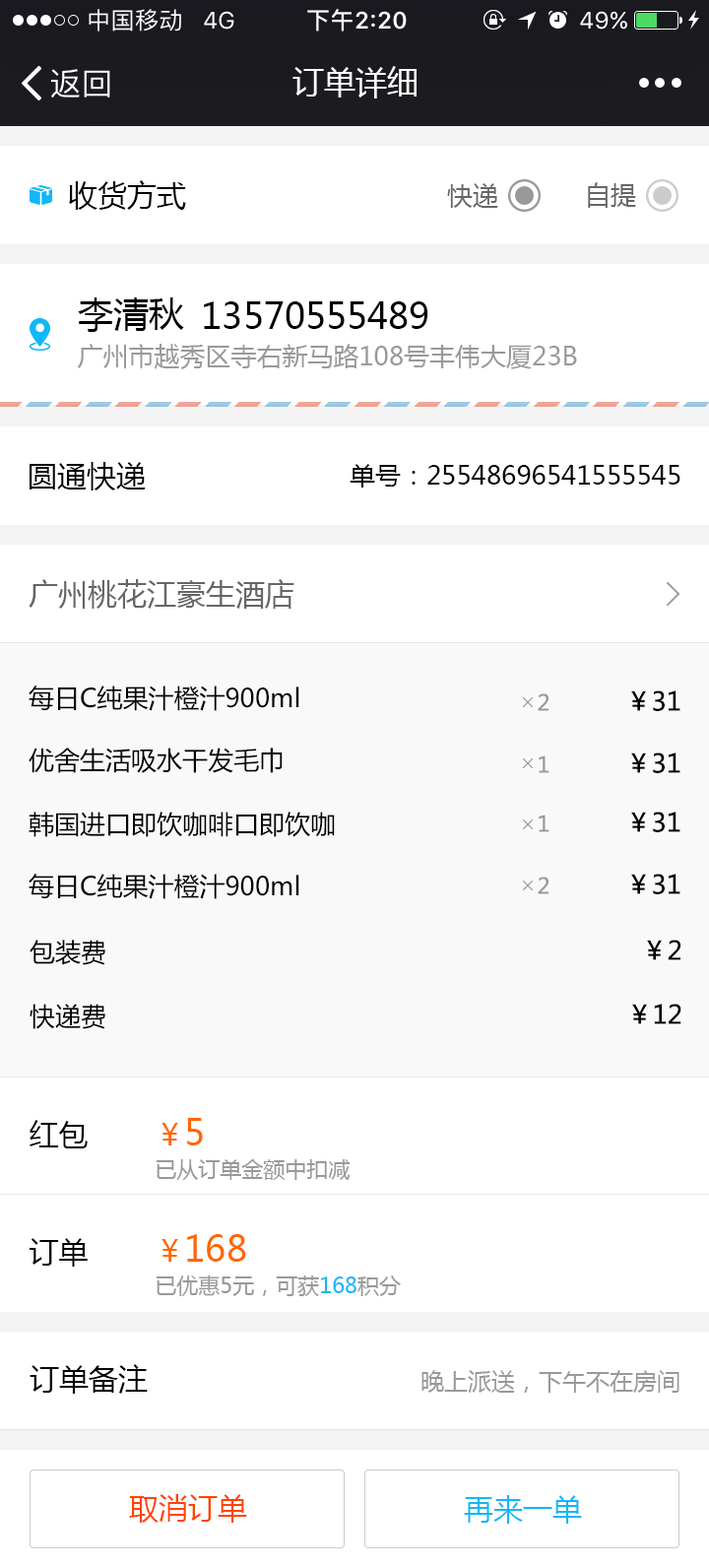
<style>
.page{position:relative;width:709px;height:1568px;background:#ffffff}
.page>*{position:absolute;margin:0}
.t1{font:31.5px "MicrosoftYaHei";color:#ffffff}
.t2{font:29.5px "MicrosoftYaHei";color:#000000}
.t3{font:25.6px "MicrosoftYaHei";color:#666666}
.t4{font:35.5px "MicrosoftYaHei";color:#000000}
.t5{font:25.6px "MicrosoftYaHei";color:#999999}
.t6{font:25.6px "MicrosoftYaHei";color:#000000}
.t7{font:29.5px "MicrosoftYaHei";color:#666666}
.t8{font:21.7px "MicrosoftYaHei";color:#999999}
.t9{font:21.7px/43.3px "MicrosoftYaHei";color:#999999}
.t10{font:29.5px/43.3px "MicrosoftYaHei";color:#ff6600}
.t11{font:35.5px/43.3px "MicrosoftYaHei";color:#ff6600}
.t12{font:21.7px/43.3px "MicrosoftYaHei";color:#12b7f5}
.t13{font:23.6px "MicrosoftYaHei";color:#999999}
.t14{font:29.5px "MicrosoftYaHei";color:#ff4400}
.t15{font:29.5px "MicrosoftYaHei";color:#12b7f5}
</style>
<div class="page">
<p class="t1" style="left:293px;top:66px;width:124px;height:32px">订单详细</p>
<p class="t2" style="left:69px;top:180px;width:117px;height:30px">收货方式</p>
<p class="t3" style="left:447px;top:183px;width:51px;height:25px">快递</p>
<p class="t3" style="left:588px;top:182px;width:48px;height:26px">自提</p>
<p class="t4" style="left:78px;top:297px;width:106px;height:35px">李清秋</p>
<p class="t4" style="left:204px;top:301px;width:224px;height:28px">13570555489</p>
<p class="t5" style="left:77px;top:344px;width:500px;height:25px">广州市越秀区寺右新马路108号丰伟大厦23B</p>
<p class="t2" style="left:30px;top:462px;width:116px;height:28px">圆通快递</p>
<p class="t6" style="left:350px;top:464px;width:331px;height:24px">单号：25548696541555545</p>
<p class="t7" style="left:29px;top:579px;width:265px;height:30px">广州桃花江豪生酒店</p>
<p class="t6" style="left:29px;top:686px;width:270px;height:25px">每日C纯果汁橙汁900ml</p>
<p class="t8" style="left:538px;top:693px;width:11px;height:18px">2</p>
<p class="t6" style="left:631px;top:690px;width:50px;height:21px">￥31</p>
<p class="t6" style="left:29px;top:748px;width:254px;height:25px">优舍生活吸水干发毛巾</p>
<p class="t8" style="left:539px;top:755px;width:11px;height:18px">1</p>
<p class="t6" style="left:631px;top:752px;width:50px;height:21px">￥31</p>
<p class="t6" style="left:29px;top:812px;width:306px;height:25px">韩国进口即饮咖啡口即饮咖</p>
<p class="t8" style="left:539px;top:815px;width:11px;height:17px">1</p>
<p class="t6" style="left:631px;top:812px;width:50px;height:20px">￥31</p>
<p class="t6" style="left:29px;top:874px;width:270px;height:25px">每日C纯果汁橙汁900ml</p>
<p class="t8" style="left:538px;top:877px;width:11px;height:17px">2</p>
<p class="t6" style="left:631px;top:874px;width:50px;height:20px">￥31</p>
<p class="t6" style="left:30px;top:940px;width:75px;height:25px">包装费</p>
<p class="t6" style="left:647px;top:940px;width:34px;height:20px">￥2</p>
<p class="t6" style="left:30px;top:1004px;width:75px;height:25px">快递费</p>
<p class="t6" style="left:632px;top:1004px;width:50px;height:20px">￥12</p>
<p class="t2" style="left:30px;top:1120px;width:58px;height:28px">红包</p>
<p class="t9" style="left:156px;top:1118px;width:195px;height:62px"><span class="t10">￥</span><span class="t11">5<br></span>已从订单金额中扣减</p>
<p class="t2" style="left:30px;top:1238px;width:58px;height:29px">订单</p>
<p class="t9" style="left:156px;top:1234px;width:245px;height:62px"><span class="t10">￥</span><span class="t11">168<br></span>已优惠5元，可获<span class="t12">168</span>积分</p>
<p class="t2" style="left:30px;top:1364px;width:118px;height:30px">订单备注</p>
<p class="t13" style="left:422px;top:1370px;width:258px;height:23px">晚上派送，下午不在房间</p>
<p class="t14" style="left:129px;top:1494px;width:118px;height:29px">取消订单</p>
<p class="t15" style="left:464px;top:1495px;width:118px;height:29px">再来一单</p>
</div>
